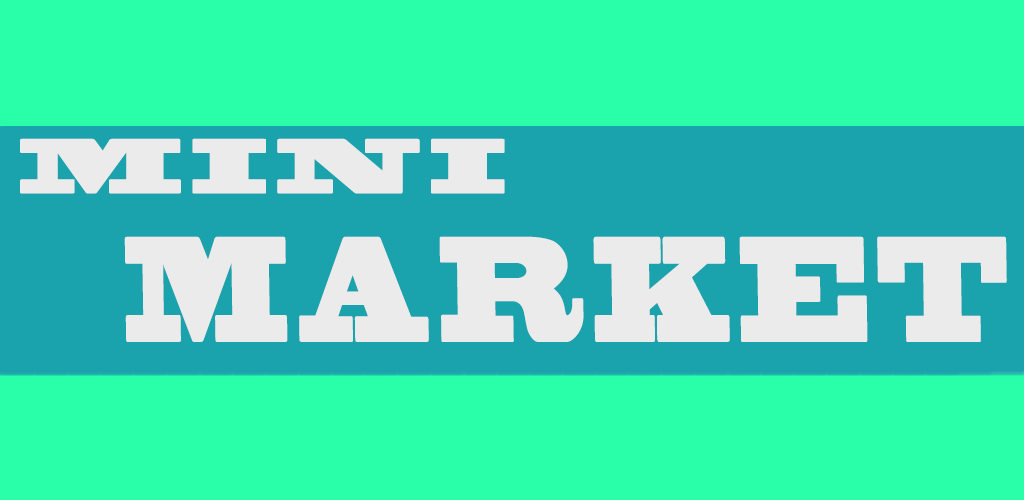
<style>
.page{position:relative;width:1024px;height:500px;background:#29ffa9}
.page>*{position:absolute;margin:0}
.t1{font:72px "BlackoakStd";letter-spacing:0.1em;color:#ebebeb;font-weight:bold}
.t2{font:139.2px "BlackoakStd";letter-spacing:0.1em;color:#ebebeb;font-weight:bold;scale:0.52 1}
</style>
<div class="page">
<p class="t1" style="left:20px;top:138px;width:485px;height:56px">MINI</p>
<p class="t2" style="left:124px;top:236px;width:883px;height:106px">MARKET</p>
</div>
